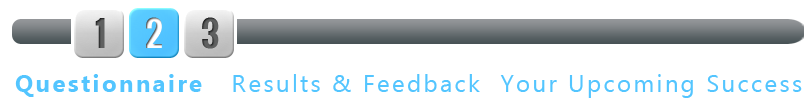
<style>
.page{position:relative;width:810px;height:107px;background:#ffffff}
.page>*{position:absolute;margin:0}
.t1{font:24px "Ebrima";letter-spacing:0.1em;color:#53c5ff}
.t2{font:24px "Ebrima-Bold";letter-spacing:0.1em;color:#53c5ff}
</style>
<div class="page">
<p class="t1" style="left:15px;top:74px;width:787px;height:24px"><span class="t2">Questionnaire   </span>Results &amp; Feedback  Your Upcoming Success</p>
</div>
